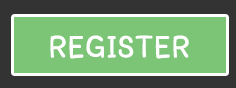
<style>
.page{position:relative;width:236px;height:88px;background:#7cc576}
.page>*{position:absolute;margin:0}
.t1{font:42.9px "LayijiMaHaNiYomV1.5";letter-spacing:0.01em;color:#ffffff;font-weight:bold}
</style>
<div class="page">
<p class="t1" style="left:50px;top:35px;width:139px;height:24px">REGISTER</p>
</div>
